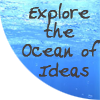
<style>
.page{position:relative;width:100px;height:100px;background:#ffffff}
.page>*{position:absolute;margin:0}
.t1{font:16px "TullysHand-Plain";color:#443f3f;font-weight:bold}
</style>
<div class="page">
<p class="t1" style="left:22px;top:3px;width:79px;height:75px;text-align:center">Explore <br>the <br>Ocean of <br>Ideas</p>
</div>
